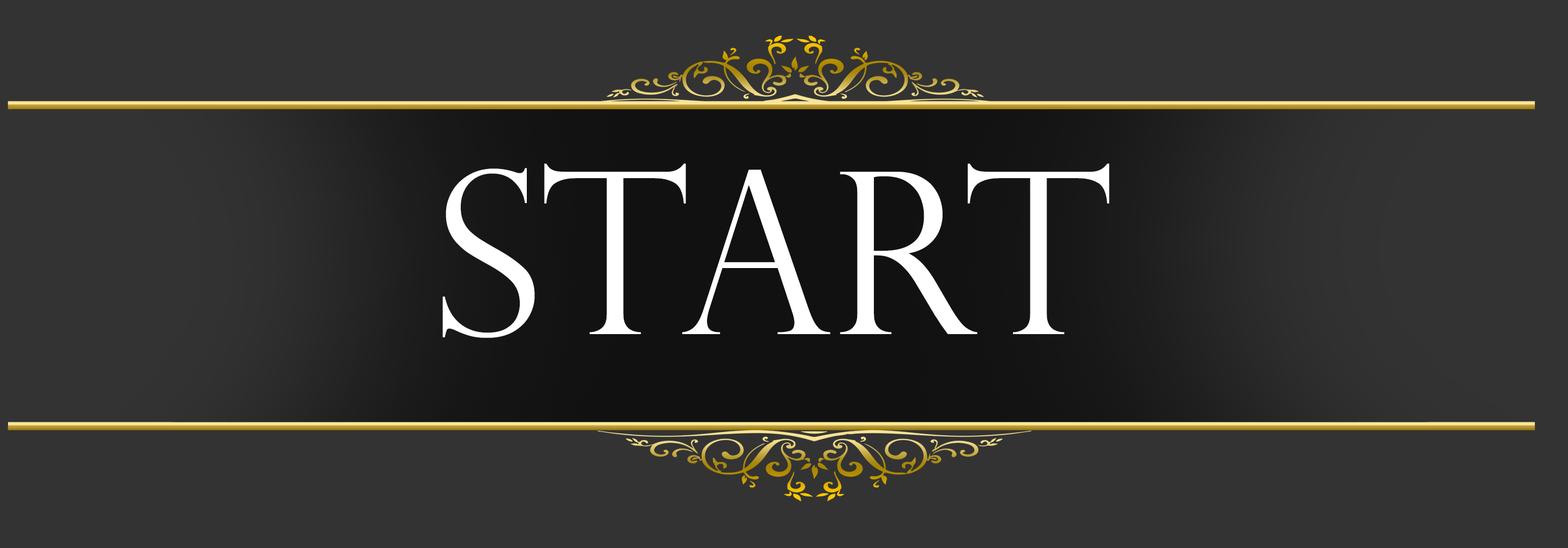
<style>
.page{position:relative;width:1568px;height:548px;background:#333333}
.page>*{position:absolute;margin:0}
.t1{font:225.6px "PerpetuaTitlingMT-Light";color:#ffffff}
</style>
<div class="page">
<p class="t1" style="left:442px;top:164px;width:667px;height:174px">start</p>
</div>
